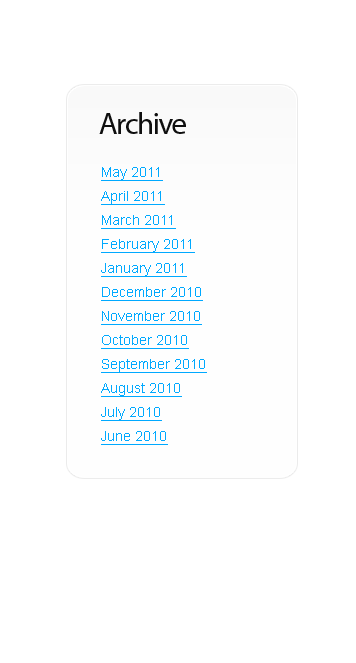
<style>
.page{position:relative;width:356px;height:663px;background:#ffffff}
.page>*{position:absolute;margin:0}
.t1{font:31px "MyriadPro-Regular";letter-spacing:-0.05em;color:#0f0f0f}
.t2{font:14px/24px "ArialMT";color:#00a9ff;text-decoration:underline}
</style>
<div class="page">
<p class="t1" style="left:99px;top:112px;width:87px;height:22px">Archive</p>
<p class="t2" style="left:101px;top:167px;width:106px;height:278px">May 2011<br>April 2011<br>March 2011<br>February 2011<br>January 2011<br>December 2010<br>November 2010<br>October 2010<br>September 2010<br>August 2010<br>July 2010<br>June 2010</p>
</div>
